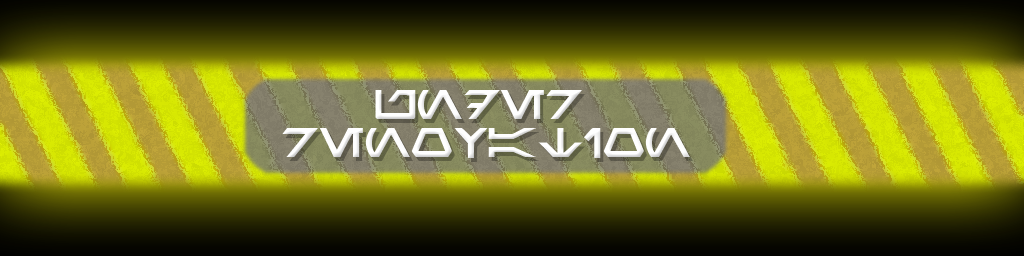
<style>
.page{position:relative;width:1024px;height:256px}
.page>*{position:absolute;margin:0}
.t1{font:32px "Aurabesh";color:#ffffff}
</style>
<div class="page">
<p class="t1" style="left:282px;top:90px;width:408px;height:68px;text-align:center">UNDER <br>RENOVATION</p>
</div>
